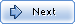
<style>
.page{position:relative;width:75px;height:24px}
.page>*{position:absolute;margin:0}
.t1{font:10px "Tahoma";letter-spacing:0.1em;color:#000000}
</style>
<div class="page">
<p class="t1" style="left:33px;top:8px;width:22px;height:7px">Next</p>
</div>
